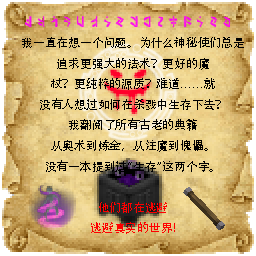
<style>
.page{position:relative;width:256px;height:256px}
.page>*{position:absolute;margin:0}
.t1{font:11.8px "AdobeHeitiStd-Regular";color:#000000}
.t2{font:11.8px "PalatinoLinotype-Roman";color:#000000}
.t3{font:11.8px "AdobeHeitiStd-Regular";color:#ff0000}
</style>
<div class="page">
<p class="t1" style="left:22px;top:37px;width:222px;height:197px;text-align:center">我一直在想一个问题。为什么神秘使们总是<br>追求更强大的法术？更好的魔<br>杖？更纯粹的源质？难道<span class="t2">……</span>就<br>没有人想过如何在杀戮中生存下去？<br>我翻阅了所有古老的典籍<br>从奥术到炼金，从注魔到傀儡。<br>没有一本提到过<span class="t2">“</span>生存<span class="t2">”</span>这两个字。<br><br><span class="t3">他们都在逃避<br>逃避真实的世界!</span></p>
</div>
